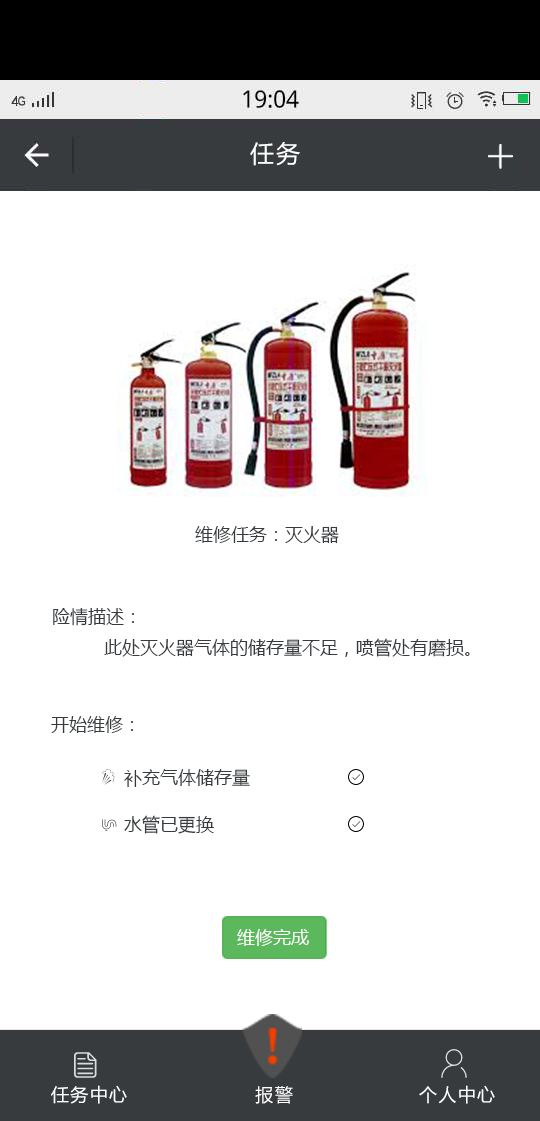
<style>
.page{position:relative;width:540px;height:1121px;background:#ffffff}
.page>*{position:absolute;margin:0}
.t1{font:24px "MicrosoftYaHei";letter-spacing:0.075em;color:#ffffff;text-transform:uppercase}
.t2{font:18px "MicrosoftYaHei";color:#373b3e}
.t3{font:18px "MicrosoftYaHei";color:#ffffff}
</style>
<div class="page">
<p class="t1" style="left:250px;top:141px;width:50px;height:25px">任务</p>
<p class="t2" style="left:195px;top:526px;width:144px;height:18px">维修任务：灭火器</p>
<p class="t2" style="left:53px;top:607px;width:82px;height:19px">险情描述：</p>
<p class="t2" style="left:104px;top:638px;width:366px;height:19px">此处灭火器气体的储存量不足，喷管处有磨损。</p>
<p class="t2" style="left:51px;top:716px;width:83px;height:17px">开始维修：</p>
<p class="t2" style="left:124px;top:769px;width:126px;height:18px">补充气体储存量</p>
<p class="t2" style="left:124px;top:815px;width:90px;height:19px">水管已更换</p>
<p class="t3" style="left:237px;top:929px;width:72px;height:17px">维修完成</p>
</div>
